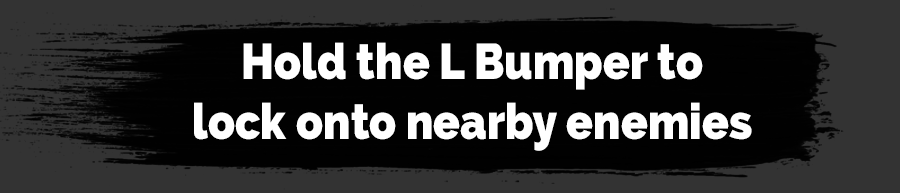
<style>
.page{position:relative;width:900px;height:193px;background:#010101}
.page>*{position:absolute;margin:0}
.t1{font:50px "Raleway-Heavy";color:#ffffff;scale:0.88 1}
</style>
<div class="page">
<p class="t1" style="left:194px;top:42px;width:558px;height:109px;text-align:center">Hold the L Bumper to<br>lock onto nearby enemies</p>
</div>
